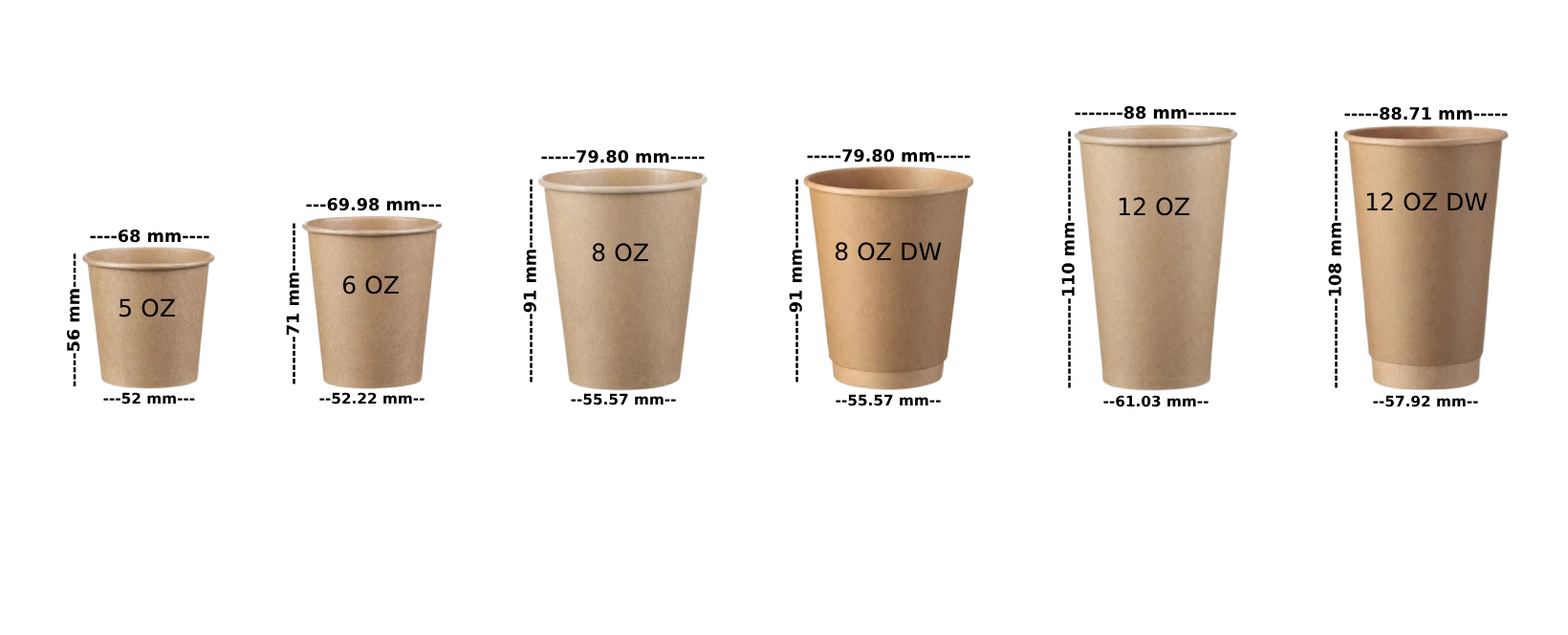
<style>
.page{position:relative;width:1568px;height:635px;background:#ffffff}
.page>*{position:absolute;margin:0}
.t1{font:16.9px "DejaVuSans-Bold";color:#000000}
.t2{font:24px "DejaVuSans";color:#000000}
.t3{font:14.6px "DejaVuSans-Bold";color:#000000}
</style>
<div class="page">
<p class="t1" style="left:1075px;top:105px;width:161px;height:15px">-------88 mm-------</p>
<p class="t1" style="left:1344px;top:106px;width:164px;height:14px">-----88.71 mm-----</p>
<p class="t1" style="left:1061px;top:131px;width:14px;height:257px;rotate:-90deg">-------------110 mm-------------</p>
<p class="t1" style="left:1328px;top:131px;width:13px;height:257px;rotate:-90deg">-------------108 mm-------------</p>
<p class="t1" style="left:541px;top:149px;width:164px;height:14px">-----79.80 mm-----</p>
<p class="t1" style="left:807px;top:148px;width:163px;height:15px">-----79.80 mm-----</p>
<p class="t1" style="left:523px;top:179px;width:13px;height:203px;rotate:-90deg">----------91 mm----------</p>
<p class="t1" style="left:789px;top:179px;width:13px;height:203px;rotate:-90deg">----------91 mm----------</p>
<p class="t1" style="left:306px;top:197px;width:136px;height:14px">---69.98 mm---</p>
<p class="t2" style="left:1119px;top:197px;width:70px;height:19px">12 OZ</p>
<p class="t2" style="left:1366px;top:192px;width:122px;height:19px">12 OZ DW</p>
<p class="t1" style="left:90px;top:229px;width:119px;height:14px">----68 mm----</p>
<p class="t1" style="left:286px;top:223px;width:13px;height:161px;rotate:-90deg">-------71 mm-------</p>
<p class="t2" style="left:592px;top:243px;width:56px;height:19px">8 OZ</p>
<p class="t2" style="left:835px;top:242px;width:107px;height:19px">8 OZ DW</p>
<p class="t1" style="left:67px;top:253px;width:13px;height:133px;rotate:-90deg">-----56 mm-----</p>
<p class="t2" style="left:342px;top:275px;width:57px;height:19px">6 OZ</p>
<p class="t2" style="left:120px;top:298px;width:55px;height:19px">5 OZ</p>
<p class="t3" style="left:103px;top:392px;width:92px;height:12px">---52 mm---</p>
<p class="t3" style="left:319px;top:392px;width:106px;height:12px">--52.22 mm--</p>
<p class="t3" style="left:571px;top:393px;width:105px;height:12px">--55.57 mm--</p>
<p class="t3" style="left:836px;top:394px;width:105px;height:12px">--55.57 mm--</p>
<p class="t3" style="left:1103px;top:395px;width:106px;height:12px">--61.03 mm--</p>
<p class="t3" style="left:1373px;top:395px;width:105px;height:12px">--57.92 mm--</p>
</div>
